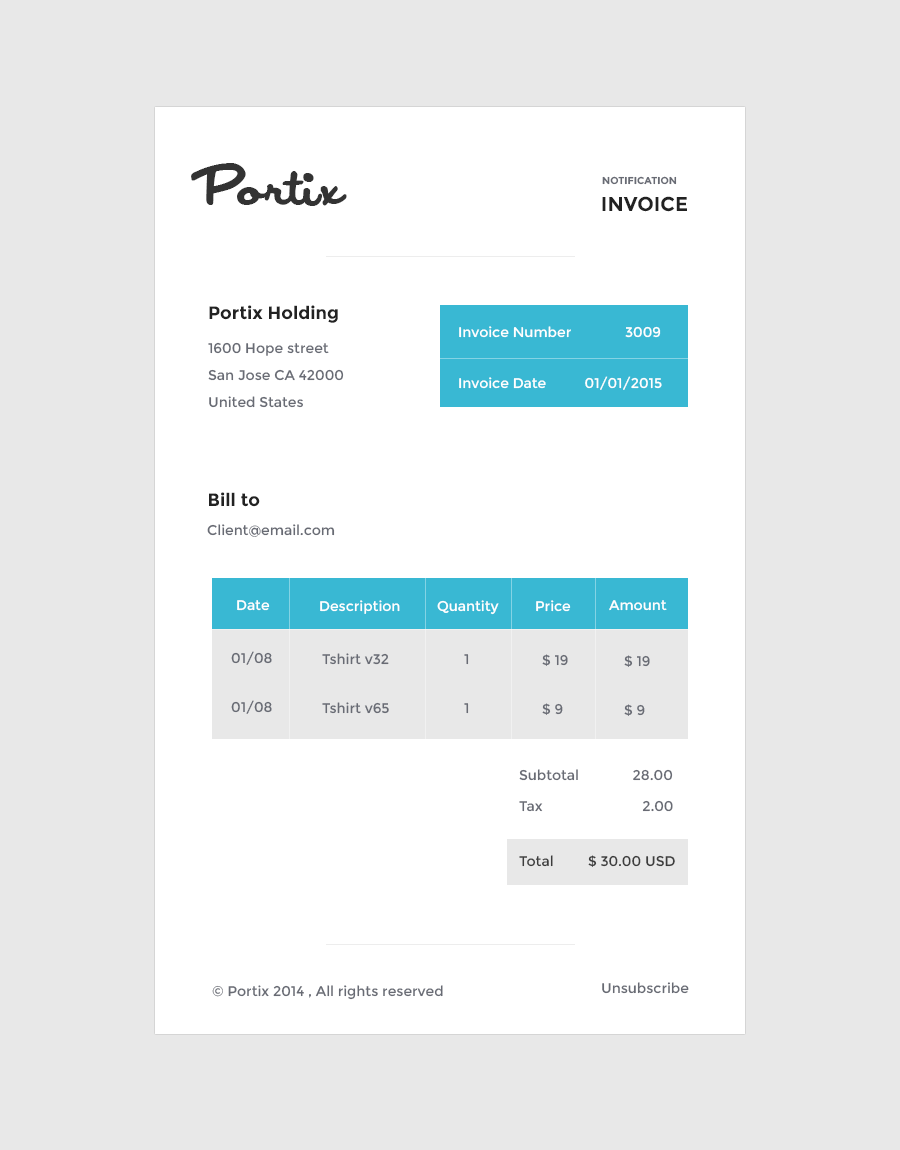
<style>
.page{position:relative;width:900px;height:1150px;background:#e8e8e8}
.page>*{position:absolute;margin:0}
.t1{font:63px "Japan";color:#333333}
.t2{font:10px "Montserrat-Bold";color:#686b74}
.t3{font:20px "Montserrat-Bold";color:#222222}
.t4{font:18px "Montserrat-Bold";color:#222222}
.t5{font:14px/27px "Montserrat-Regular";color:#ffffff}
.t6{font:14px/27px "Montserrat-Regular";color:#686b74}
.t7{font:14px/24px "Montserrat-Regular";color:#ffffff}
.t8{font:14px "Montserrat-Regular";color:#686b74}
.t9{font:14px "Montserrat-Regular";color:#ffffff}
.t10{font:14px "Montserrat-Regular";color:#3d3d3d}
</style>
<div class="page">
<p class="t1" style="left:191px;top:163px;width:156px;height:43px">Portix</p>
<p class="t2" style="left:602px;top:176px;width:75px;height:9px">NOTIFICATION</p>
<p class="t3" style="left:602px;top:196px;width:85px;height:16px">INVOICE</p>
<p class="t4" style="left:209px;top:305px;width:129px;height:18px">Portix Holding</p>
<p class="t5" style="left:459px;top:326px;width:203px;height:64px">Invoice Number              3009<br><span class="t6"><br></span><span class="t7">Invoice Date          01/01/2015</span></p>
<p class="t6" style="left:208px;top:342px;width:136px;height:66px">1600 Hope street<br>San Jose CA 42000<br>United States</p>
<p class="t4" style="left:209px;top:492px;width:51px;height:15px">Bill to</p>
<p class="t8" style="left:207px;top:524px;width:128px;height:13px">Client@email.com</p>
<p class="t9" style="left:237px;top:600px;width:33px;height:11px">Date</p>
<p class="t9" style="left:320px;top:600px;width:80px;height:14px">Description</p>
<p class="t9" style="left:437px;top:600px;width:62px;height:15px">Quantity</p>
<p class="t9" style="left:536px;top:600px;width:35px;height:12px">Price</p>
<p class="t9" style="left:609px;top:600px;width:58px;height:11px">Amount</p>
<p class="t8" style="left:231px;top:651px;width:41px;height:14px">01/08</p>
<p class="t8" style="left:322px;top:653px;width:67px;height:12px">Tshirt v32</p>
<p class="t8" style="left:464px;top:654px;width:5px;height:11px">1</p>
<p class="t8" style="left:542px;top:654px;width:26px;height:12px">$ 19</p>
<p class="t8" style="left:624px;top:655px;width:26px;height:12px">$ 19</p>
<p class="t8" style="left:231px;top:700px;width:41px;height:14px">01/08</p>
<p class="t8" style="left:322px;top:702px;width:67px;height:12px">Tshirt v65</p>
<p class="t8" style="left:464px;top:703px;width:5px;height:11px">1</p>
<p class="t8" style="left:542px;top:703px;width:21px;height:12px">$ 9</p>
<p class="t8" style="left:624px;top:704px;width:21px;height:12px">$ 9</p>
<p class="t8" style="left:519px;top:769px;width:154px;height:12px">Subtotal              28.00</p>
<p class="t8" style="left:519px;top:800px;width:154px;height:12px">Tax                          2.00</p>
<p class="t10" style="left:519px;top:855px;width:156px;height:12px">Total         $ 30.00 USD</p>
<p class="t8" style="left:212px;top:985px;width:231px;height:15px">© Portix 2014 , All rights reserved</p>
<p class="t8" style="left:602px;top:982px;width:87px;height:12px">Unsubscribe</p>
</div>
